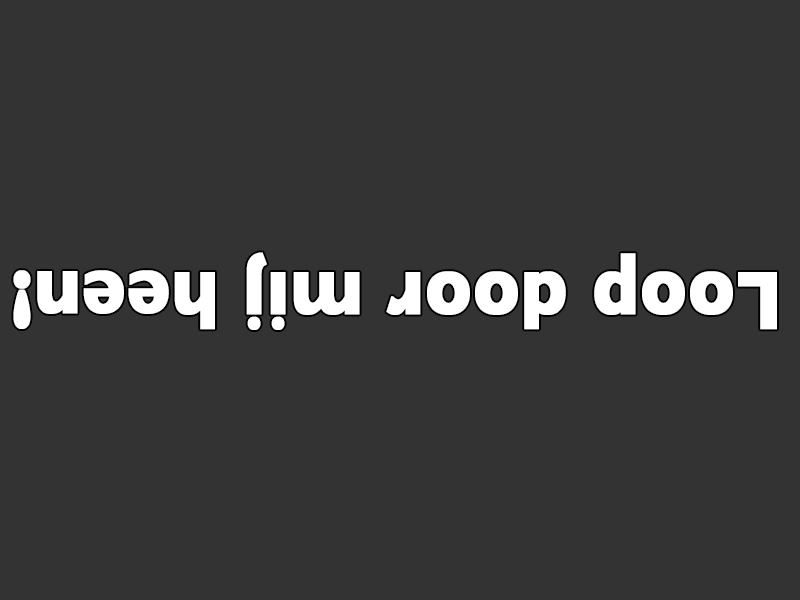
<style>
.page{position:relative;width:800px;height:600px;background:#333333}
.page>*{position:absolute;margin:0}
.t1{font:83.2px "GillSans-Bold";color:#ffffff;font-weight:bold;scale:0.87 1}
</style>
<div class="page">
<p class="t1" style="left:13px;top:252px;width:764px;height:78px;rotate:-180deg">Loop door mij heen!</p>
</div>
